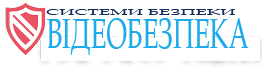
<style>
.page{position:relative;width:262px;height:68px;background:#ffffff}
.page>*{position:absolute;margin:0}
.t1{font:9px "BookAntiqua";color:#152c5b;scale:2.05 1}
.t2{font:42.4px "BookAntiqua";color:#1ea9ea;scale:0.61 1}
</style>
<div class="page">
<p class="t1" style="left:46px;top:9px;width:189px;height:6px">СИСТЕМИ БЕЗПЕКИ</p>
<p class="t2" style="left:46px;top:18px;width:203px;height:37px">ВІДЕОБЕЗПЕКА</p>
</div>
